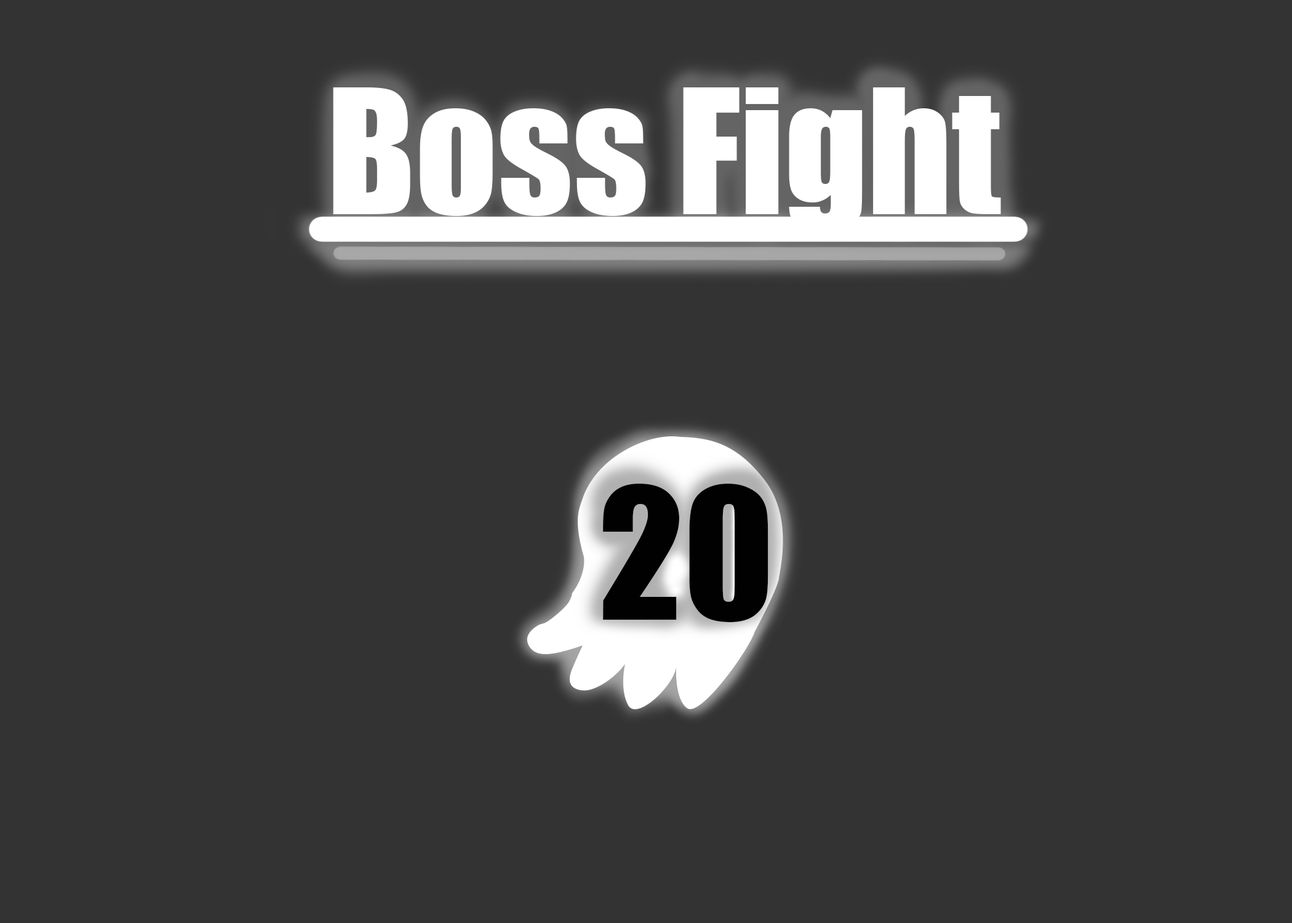
<style>
.page{position:relative;width:1292px;height:923px;background:#333333}
.page>*{position:absolute;margin:0}
.t1{font:160.5px "Impact";color:#ffffff}
.t2{font:168.7px "Impact";color:#010101}
</style>
<div class="page">
<p class="t1" style="left:333px;top:87px;width:668px;height:145px">Boss Fight</p>
<p class="t2" style="left:603px;top:484px;width:165px;height:138px">20</p>
</div>
